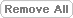
<style>
.page{position:relative;width:73px;height:18px;background:#ffffff}
.page>*{position:absolute;margin:0}
.t1{font:11px "ArialMT";color:#7d7d7d;font-weight:bold}
</style>
<div class="page">
<p class="t1" style="left:5px;top:5px;width:63px;height:8px">Remove All</p>
</div>
